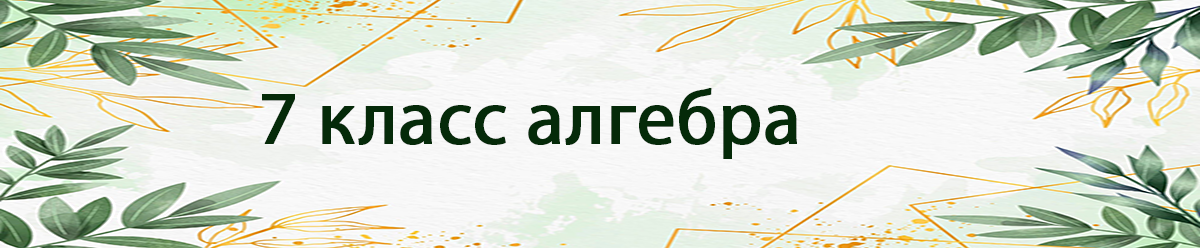
<style>
.page{position:relative;width:1200px;height:248px}
.page>*{position:absolute;margin:0}
.t1{font:75.8px "MyriadPro-Regular";color:#052a09;font-weight:bold}
</style>
<div class="page">
<p class="t1" style="left:262px;top:88px;width:535px;height:71px">7 класс алгебра</p>
</div>
